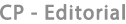
<style>
.page{position:relative;width:126px;height:24px;background:#ffffff}
.page>*{position:absolute;margin:0}
.t1{font:20.9px "MyriadPro-Regular";letter-spacing:0.04em;color:#8d8d8d;font-weight:bold}
</style>
<div class="page">
<p class="t1" style="left:0px;top:4px;width:125px;height:16px">CP - Editorial</p>
</div>
